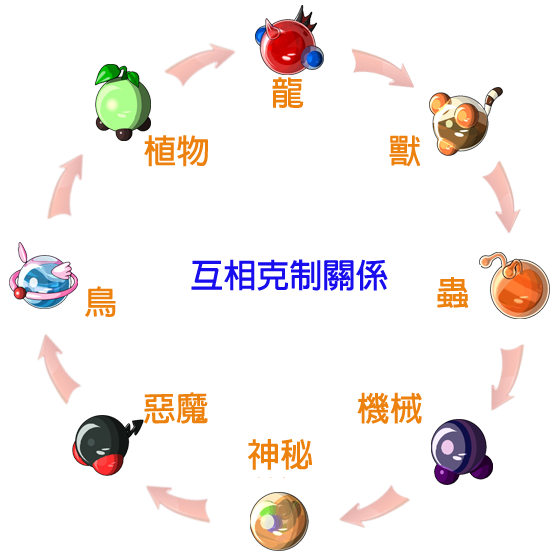
<style>
.page{position:relative;width:558px;height:557px;background:#ffffff}
.page>*{position:absolute;margin:0}
.t1{font:33px "AdobeFanHeitiStd-Bold";color:#ed810d}
.t2{font:33px "AdobeFanHeitiStd-Bold";color:#180ded}
</style>
<div class="page">
<p class="t1" style="left:272px;top:77px;width:32px;height:31px">龍</p>
<p class="t1" style="left:144px;top:135px;width:64px;height:32px">植物</p>
<p class="t1" style="left:389px;top:135px;width:32px;height:32px">獸</p>
<p class="t2" style="left:191px;top:259px;width:197px;height:32px">互相克制關係</p>
<p class="t1" style="left:437px;top:277px;width:32px;height:31px">蟲</p>
<p class="t1" style="left:85px;top:286px;width:31px;height:31px">鳥</p>
<p class="t1" style="left:144px;top:392px;width:64px;height:32px;rotate:-1deg">惡魔</p>
<p class="t1" style="left:357px;top:392px;width:65px;height:32px">機械</p>
<p class="t1" style="left:248px;top:439px;width:64px;height:31px">神秘</p>
</div>
